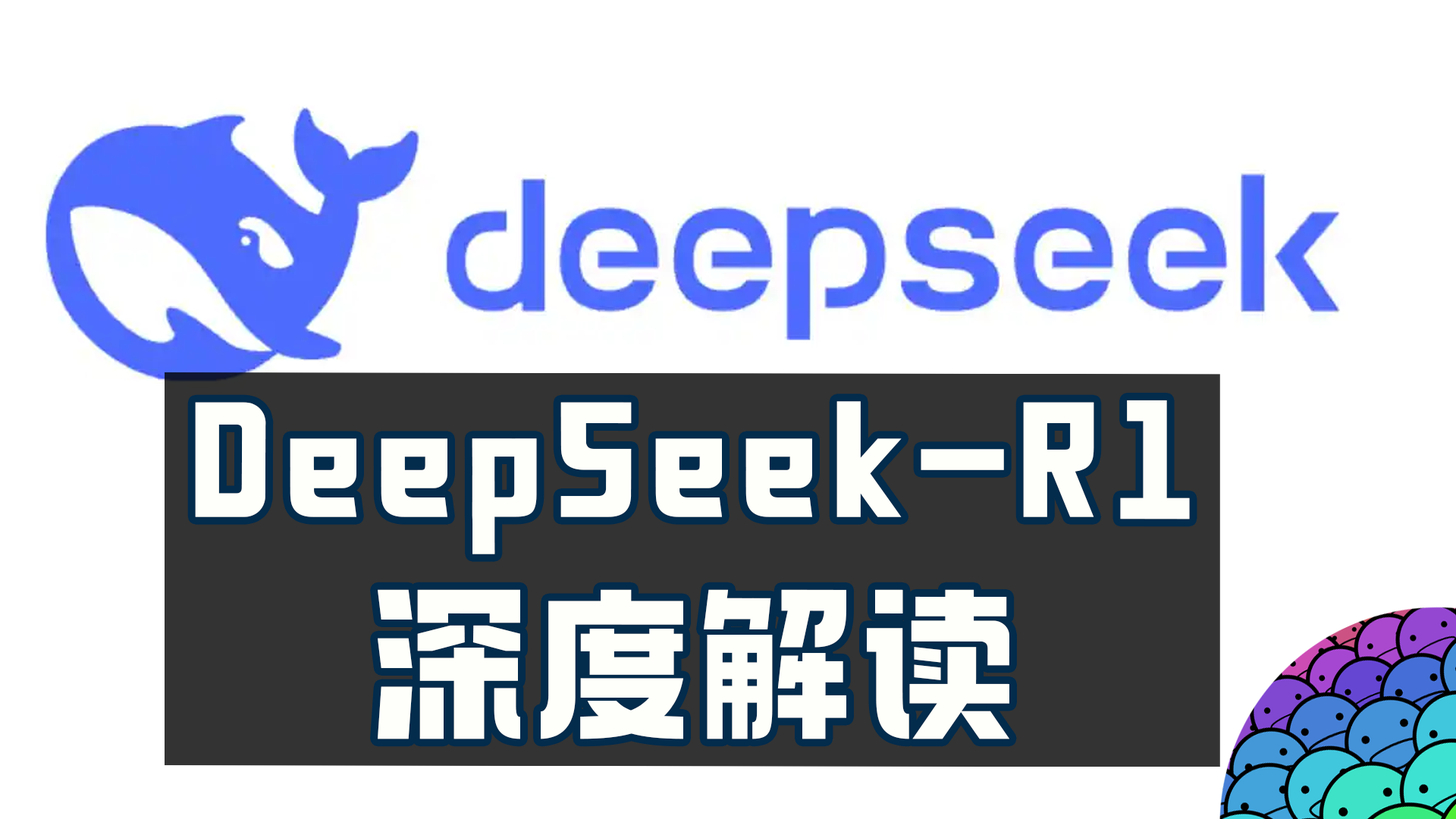
<style>
.page{position:relative;width:1456px;height:819px;background:#ffffff}
.page>*{position:absolute;margin:0}
.t1{font:166.8px/204.7px "098-";letter-spacing:0.05em;color:#fefffa}
</style>
<div class="page">
<p class="t1" style="left:195px;top:400px;width:995px;height:339px;text-align:center">DeepSeek-R1<br>深度解读</p>
</div>
